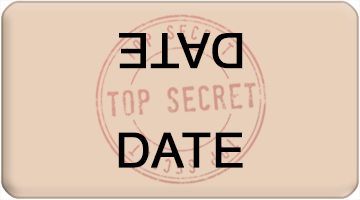
<style>
.page{position:relative;width:360px;height:200px;background:#e8d0bb}
.page>*{position:absolute;margin:0}
.t1{font:48px "ArialMT";color:#000000;font-weight:bold}
</style>
<div class="page">
<p class="t1" style="left:119px;top:33px;width:124px;height:36px;rotate:180deg">DATE</p>
<p class="t1" style="left:118px;top:132px;width:125px;height:36px">DATE</p>
</div>
